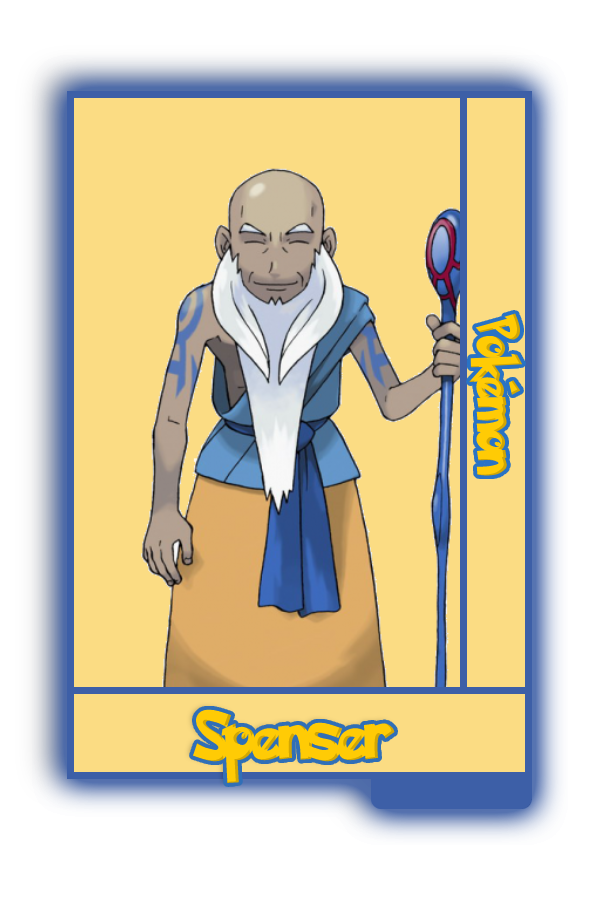
<style>
.page{position:relative;width:600px;height:900px;background:#fbdc83}
.page>*{position:absolute;margin:0}
.t1{font:48.8px "PokemonSolidNormal";color:#ffcb05;scale:0.8 1}
.t2{font:56.6px "PokemonSolidNormal";color:#ffcb05;scale:0.92 1}
</style>
<div class="page">
<p class="t1" style="left:469px;top:313px;width:54px;height:163px;rotate:90deg">Pokémon</p>
<p class="t2" style="left:192px;top:709px;width:203px;height:74px">Spenser</p>
</div>
